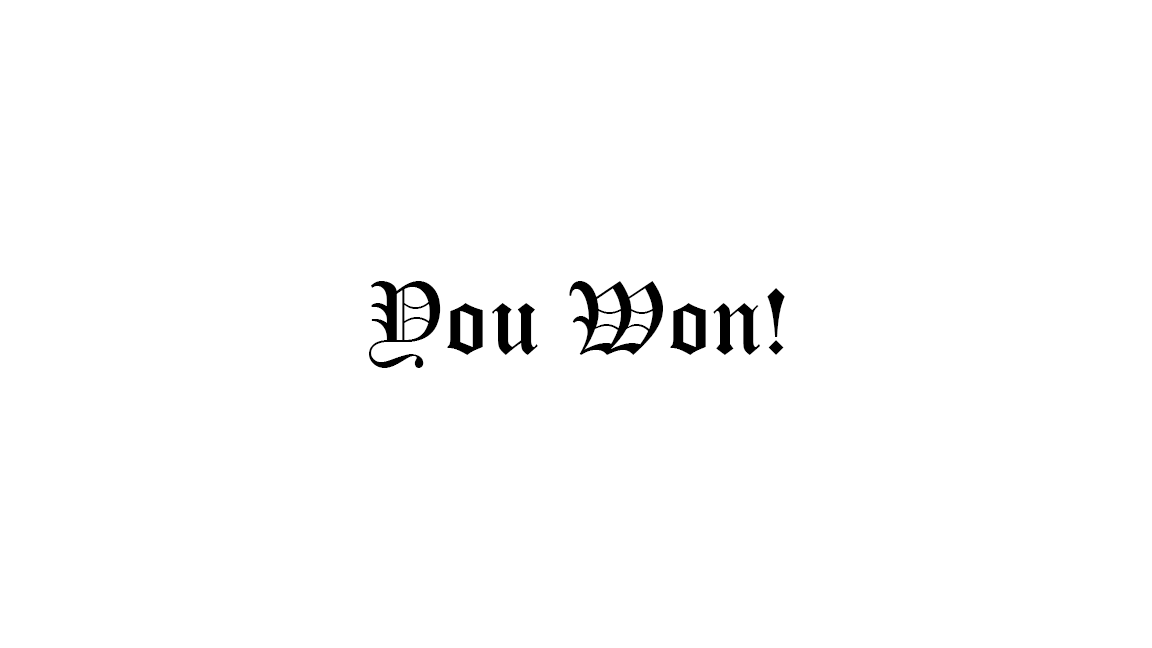
<style>
.page{position:relative;width:1152px;height:648px;background:#ffffff}
.page>*{position:absolute;margin:0}
.t1{font:100px "OldEnglishTextMT";color:#000000}
</style>
<div class="page">
<p class="t1" style="left:369px;top:281px;width:416px;height:87px">You Won!</p>
</div>
